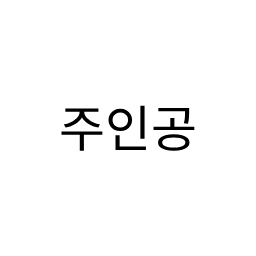
<style>
.page{position:relative;width:256px;height:256px;background:#ffffff}
.page>*{position:absolute;margin:0}
.t1{font:50px "NotoSansKR-Regular";color:#000000}
</style>
<div class="page">
<p class="t1" style="left:61px;top:105px;width:134px;height:46px">주인공</p>
</div>
